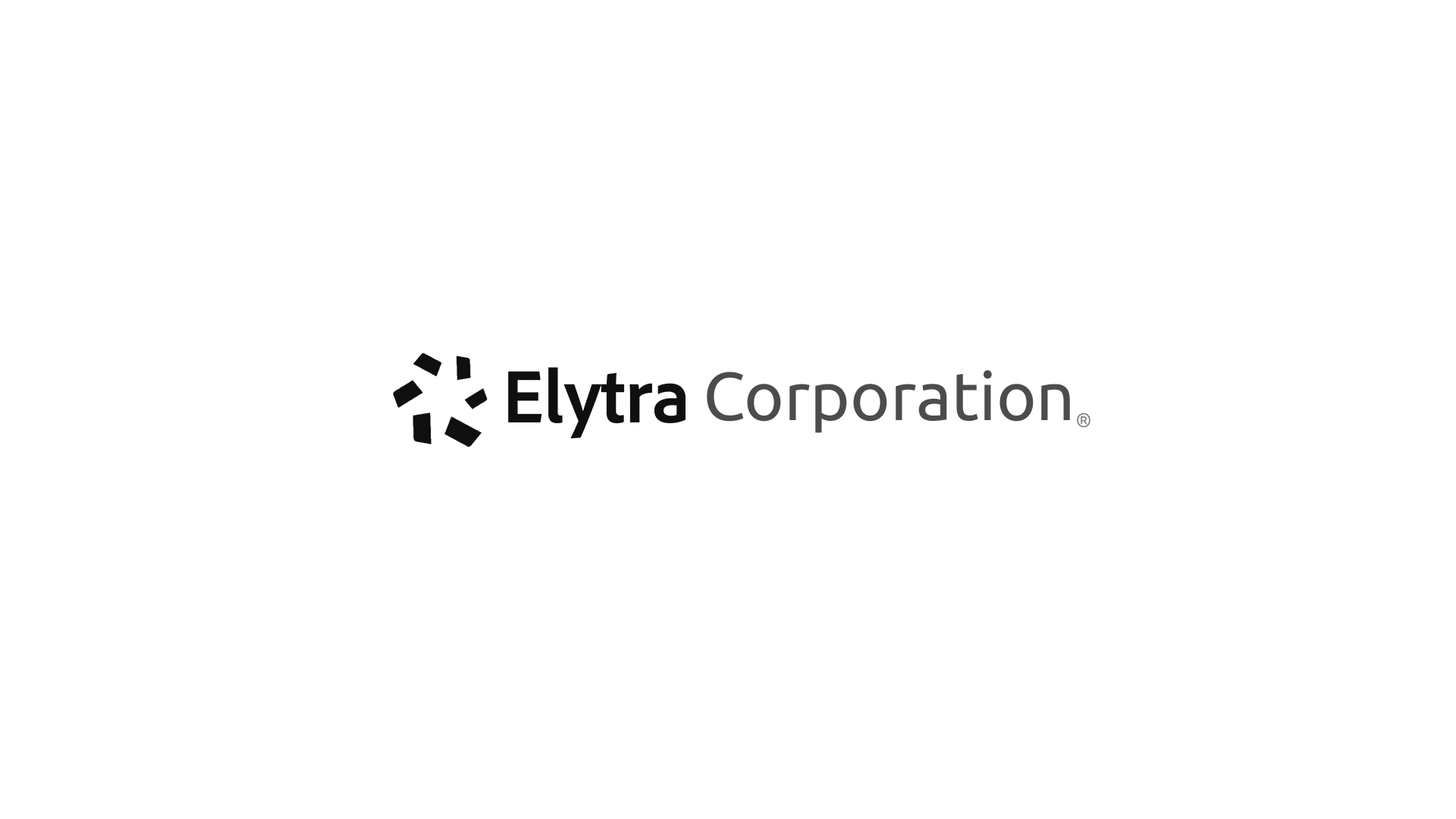
<style>
.page{position:relative;width:1456px;height:819px;background:#ffffff}
.page>*{position:absolute;margin:0}
.t1{font:67.8px "Ubuntu-Regular";color:#4c4c4c}
.t2{font:19.6px "Ubuntu-Regular";color:#7f7f7f}
</style>
<div class="page">
<p class="t1" style="left:707px;top:370px;width:363px;height:63px">Corporation</p>
<p class="t2" style="left:1077px;top:413px;width:13px;height:15px">®</p>
</div>
